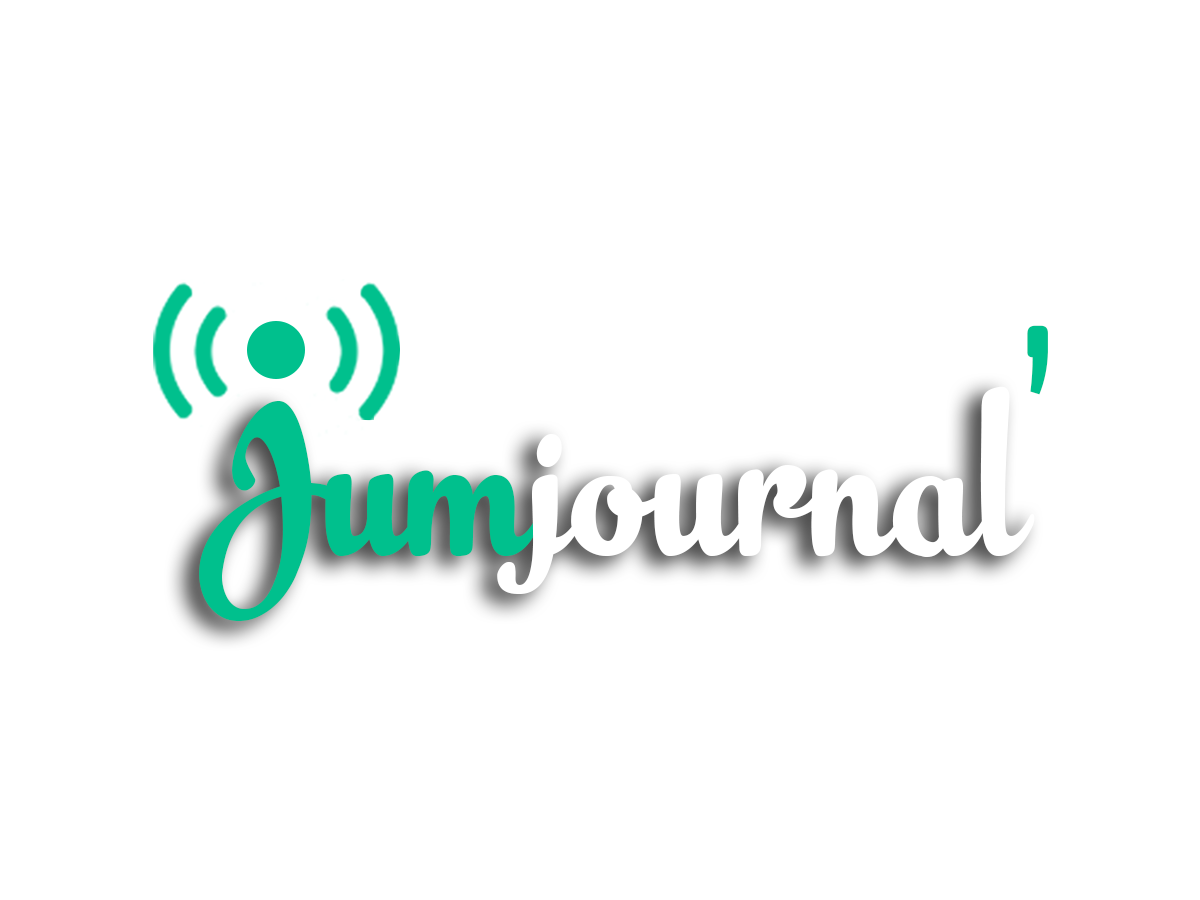
<style>
.page{position:relative;width:1200px;height:900px;background:#ffffff}
.page>*{position:absolute;margin:0}
.t1{font:306.3px "Exo2-Light";color:#00c08d}
.t2{font:227.4px "BananaYeti-ExtraBold";color:#ffffff}
.t3{font:227.4px "BananaYeti-ExtraBold";color:#00c08d}
</style>
<div class="page">
<p class="t1" style="left:1027px;top:325px;width:21px;height:70px">’</p>
<p class="t2" style="left:199px;top:386px;width:836px;height:235px"><span class="t3">Jum</span>journal</p>
</div>
